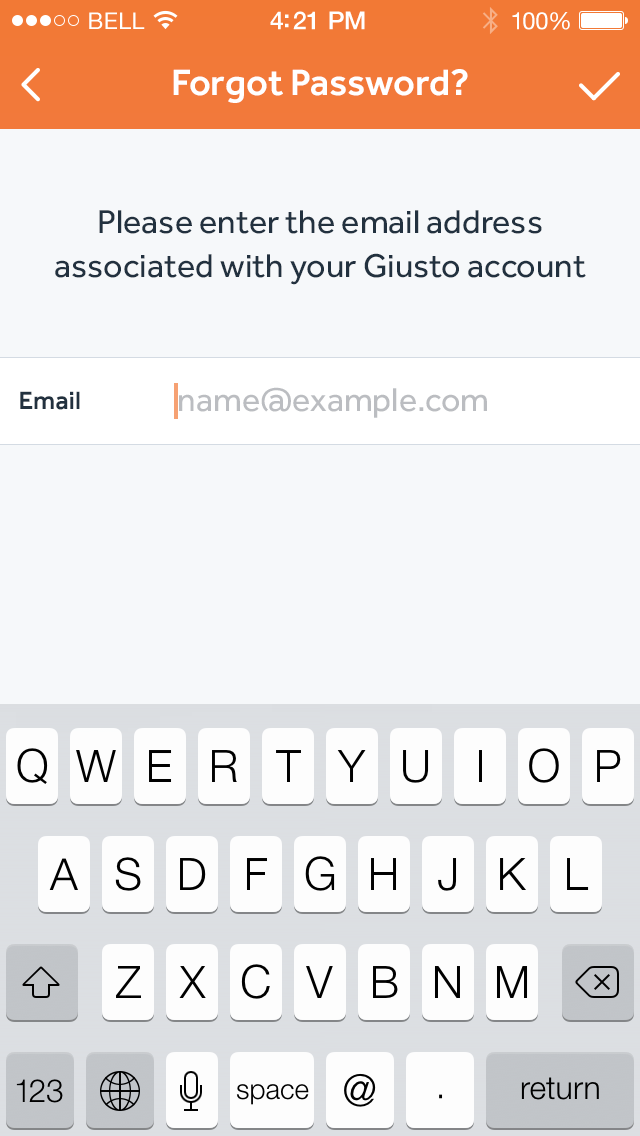
<style>
.page{position:relative;width:640px;height:1136px;background:#f6f8fa}
.page>*{position:absolute;margin:0}
.t1{font:23px "HelveticaNeue";letter-spacing:0.02em;color:#ffffff}
.t2{font:25px "HelveticaNeue-Medium";letter-spacing:-0.02em;color:#ffffff}
.t3{font:24px "HelveticaNeue";letter-spacing:-0.02em;color:#ffffff}
.t4{font:38px "Effra-Medium";color:#ffffff}
.t5{font:34px/44px "Effra-Regular";color:#22313f}
.t6{font:34px "Effra-Regular";color:#bbbdc1}
.t7{font:26px "Effra-Medium";color:#22313f}
</style>
<div class="page">
<p class="t1" style="left:89px;top:12px;width:56px;height:17px">BELL</p>
<p class="t2" style="left:270px;top:11px;width:95px;height:19px">4:21 PM</p>
<p class="t3" style="left:512px;top:12px;width:58px;height:18px">100%</p>
<p class="t4" style="left:173px;top:69px;width:295px;height:34px">Forgot Password?</p>
<p class="t5" style="left:55px;top:210px;width:531px;height:75px;text-align:center">Please enter the email address <br>associated with your Giusto account</p>
<p class="t6" style="left:179px;top:387px;width:308px;height:31px">name@example.com</p>
<p class="t7" style="left:20px;top:391px;width:60px;height:19px">Email</p>
</div>
